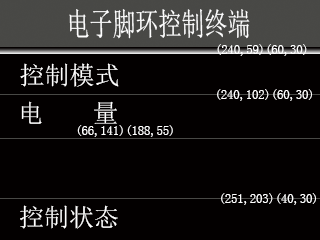
<style>
.page{position:relative;width:320px;height:240px;background:#030000}
.page>*{position:absolute;margin:0}
.t1{font:31.9px "SimSun";color:#ffffff;scale:0.72 1}
.t2{font:12.5px "SimSun";color:#ffffff}
.t3{font:25px "SimSun";color:#ffffff}
.t4{font:24.9px "SimSun";color:#ffffff}
</style>
<div class="page">
<p class="t1" style="left:69px;top:9px;width:181px;height:30px">电子脚环控制终端</p>
<p class="t2" style="left:217px;top:44px;width:90px;height:12px">(240,59)(60,30)</p>
<p class="t3" style="left:20px;top:63px;width:99px;height:24px">控制模式</p>
<p class="t2" style="left:217px;top:89px;width:95px;height:12px">(240,102)(60,30)</p>
<p class="t4" style="left:21px;top:101px;width:96px;height:23px">电    量</p>
<p class="t2" style="left:77px;top:125px;width:96px;height:12px">(66,141)(188,55)</p>
<p class="t2" style="left:221px;top:193px;width:95px;height:12px">(251,203)(40,30)</p>
<p class="t4" style="left:20px;top:205px;width:98px;height:24px">控制状态</p>
</div>
